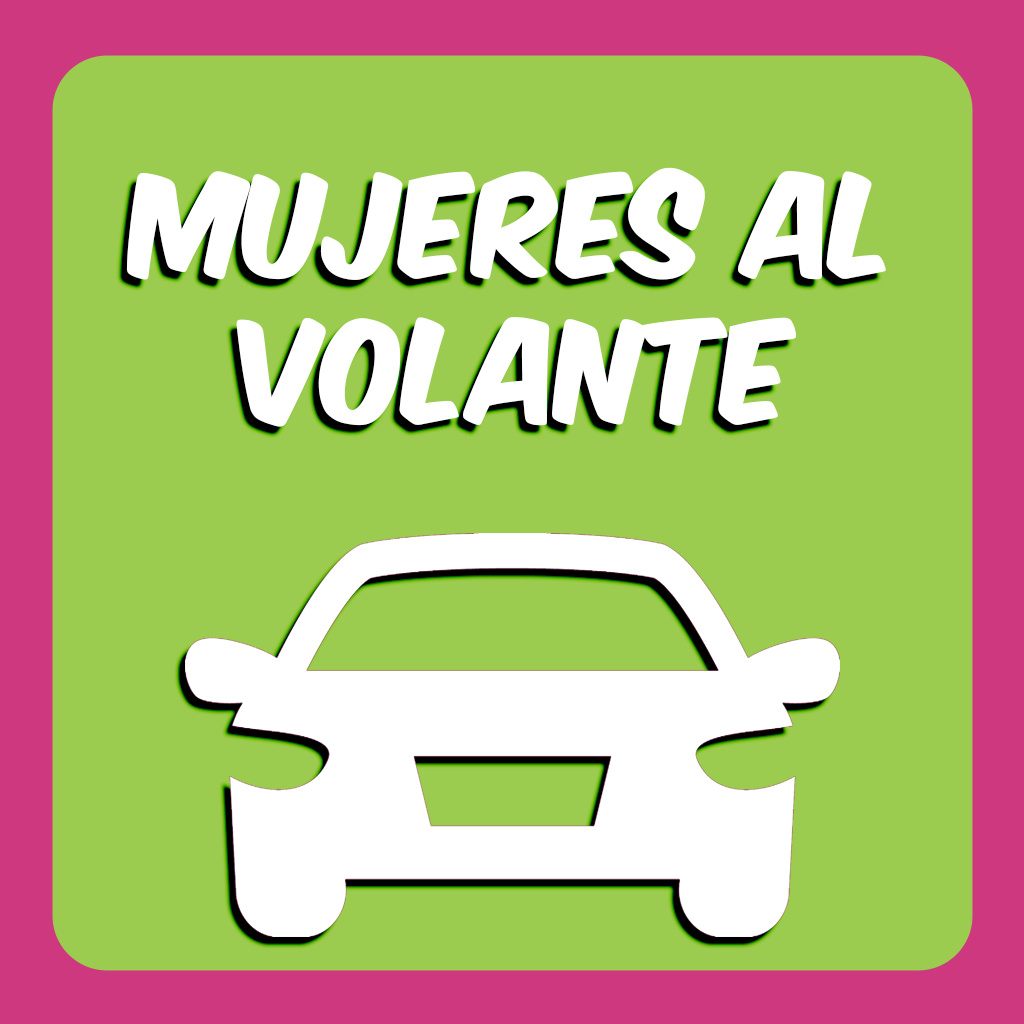
<style>
.page{position:relative;width:1024px;height:1024px;background:#9bcc4f}
.page>*{position:absolute;margin:0}
.t1{font:121px "KomikaAxis";color:#ffffff}
</style>
<div class="page">
<p class="t1" style="left:126px;top:167px;width:760px;height:260px;text-align:center">Mujeres al<br>volante</p>
</div>
